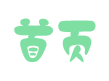
<style>
.page{position:relative;width:109px;height:81px;background:#ffffff}
.page>*{position:absolute;margin:0}
.t1{font:48px "JLuobo";color:#7fdfa3;scale:0.9 1}
</style>
<div class="page">
<p class="t1" style="left:14px;top:18px;width:82px;height:45px">首页</p>
</div>
